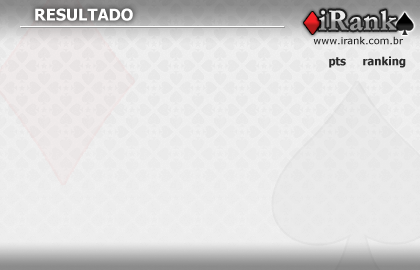
<style>
.page{position:relative;width:420px;height:270px}
.page>*{position:absolute;margin:0}
.t1{font:16.3px "Tahoma-Bold";color:#ffffff}
.t2{font:29px "Garamond-Bold";font-weight:bold}
.t3{font:9.8px "Verdana";color:#1d1d1d}
.t4{font:11.4px "Tahoma-Bold";color:#171717}
</style>
<div class="page">
<p class="t1" style="left:35px;top:8px;width:98px;height:13px">RESULTADO</p>
<p class="t2" style="left:319px;top:10px;width:78px;height:21px">iRank</p>
<p class="t3" style="left:313px;top:36px;width:90px;height:9px">www.irank.com.br</p>
<p class="t4" style="left:329px;top:57px;width:17px;height:11px;opacity:0.9">pts</p>
<p class="t4" style="left:363px;top:56px;width:43px;height:12px;opacity:0.9">ranking</p>
</div>
